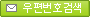
<style>
.page{position:relative;width:90px;height:17px}
.page>*{position:absolute;margin:0}
.t1{font:12px "morris9";letter-spacing:-0.03em;color:#ffffff}
</style>
<div class="page">
<p class="t1" style="left:23px;top:3px;width:58px;height:10px">우편번호검색</p>
</div>
